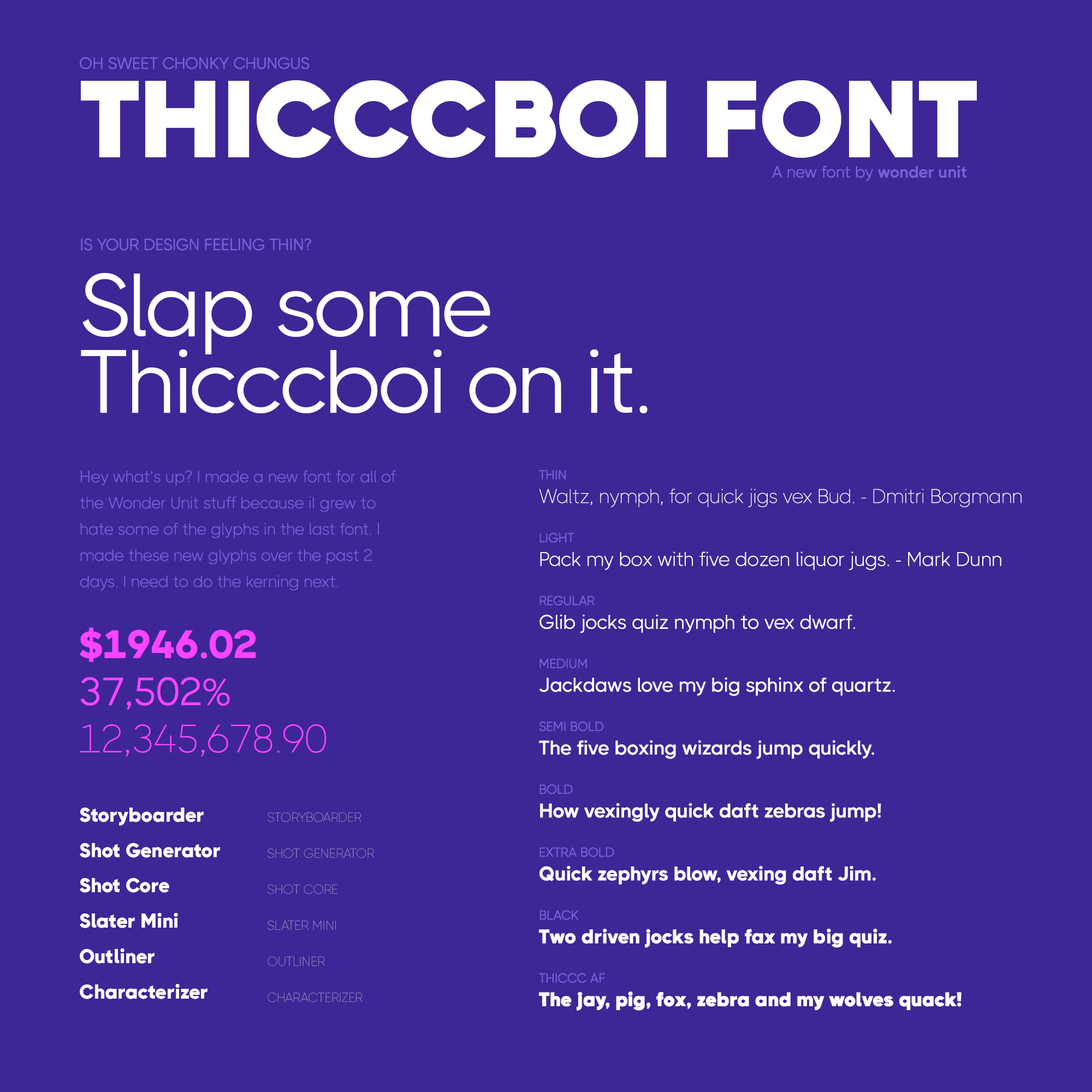
<style>
.page{position:relative;width:1092px;height:1092px;background:#3e2696}
.page>*{position:absolute;margin:0}
.t1{font:16.4px "THICCCBOI-Regular";color:#7b60dc}
.t2{font:109.3px "THICCCBOI-ThicccAF";color:#ffffff}
.t3{font:16.4px "THICCCBOI-Bold";color:#7b60dc}
.t4{font:16.4px "THICCCBOI-Regular";color:#7b60dc;text-transform:uppercase}
.t5{font:89.7px/76.4px "THICCCBOI-Regular";letter-spacing:-0.025em;color:#ffffff}
.t6{font:16.4px/26.2px "THICCCBOI-Light";color:#7b60dc}
.t7{font:19.7px "THICCCBOI-Thin";color:#ffffff}
.t8{font:13.1px "THICCCBOI-Regular";color:#7b60dc}
.t9{font:19.7px "THICCCBOI-Light";color:#ffffff}
.t10{font:19.7px "THICCCBOI-Regular";color:#ffffff}
.t11{font:19.7px "THICCCBOI-Medium";color:#ffffff}
.t12{font:19.7px "THICCCBOI-SemiBold";color:#ffffff}
.t13{font:19.7px "THICCCBOI-Bold";color:#ffffff}
.t14{font:19.7px "THICCCBOI-ExtraBold";color:#ffffff}
.t15{font:19.7px "THICCCBOI-Black";color:#ffffff}
.t16{font:19.7px "THICCCBOI-ThicccAF";color:#ffffff}
.t17{font:39.3px "THICCCBOI-Thin";color:#fd44ff}
.t18{font:39.3px "THICCCBOI-ExtraBold";color:#fd44ff}
.t19{font:39.3px "THICCCBOI-Regular";color:#fd44ff}
.t20{font:19.7px/35.4px "THICCCBOI-Black";color:#ffffff}
.t21{font:13.1px/36px "THICCCBOI-Thin";color:#a59ec9;text-transform:uppercase}
</style>
<div class="page">
<p class="t1" style="left:80px;top:57px;width:230px;height:12px">OH SWEET CHONKY CHUNGUS</p>
<p class="t2" style="left:81px;top:80px;width:896px;height:78px">THICCCBOI FONT</p>
<p class="t1" style="left:772px;top:165px;width:101px;height:16px">A new font by</p>
<p class="t3" style="left:877px;top:165px;width:89px;height:13px">wonder unit</p>
<p class="t4" style="left:81px;top:238px;width:230px;height:13px">Is your design feeling thin?</p>
<p class="t5" style="left:81px;top:273px;width:567px;height:140px">Slap some <br>Thicccboi on it.</p>
<p class="t6" style="left:80px;top:470px;width:316px;height:121px">Hey what’s up? I made a new font for all of the Wonder Unit stuff because iI grew to hate some of the glyphs in the last font. I made these new glyphs over the past 2 days. I need to do the kerning next.</p>
<p class="t7" style="left:539px;top:470px;width:483px;height:541px"><span class="t8">THIN<br></span>Waltz, nymph, for quick jigs vex Bud. - Dmitri Borgmann<br><br><span class="t8">LIGHT<br></span><span class="t9">Pack my box with five dozen liquor jugs. - Mark Dunn<br><br></span><span class="t8">REGULAR<br></span><span class="t10">Glib jocks quiz nymph to vex dwarf.<br><br></span><span class="t8">MEDIUM<br></span><span class="t11">Jackdaws love my big sphinx of quartz.<br><br></span><span class="t8">SEMI BOLD<br></span><span class="t12">The five boxing wizards jump quickly.<br><br></span><span class="t8">BOLD<br></span><span class="t13">How vexingly quick daft zebras jump!<br><br></span><span class="t8">EXTRA BOLD<br></span><span class="t14">Quick zephyrs blow, vexing daft Jim.<br><br></span><span class="t8">BLACK<br></span><span class="t15">Two driven jocks help fax my big quiz.<br><br></span><span class="t8">THICCC AF<br></span><span class="t16">The jay, pig, fox, zebra and my wolves quack!</span></p>
<p class="t17" style="left:80px;top:627px;width:247px;height:130px"><span class="t18">$1946.02<br></span><span class="t19">37,502%<br></span>12,345,678.90</p>
<p class="t20" style="left:80px;top:808px;width:140px;height:191px">Storyboarder<br>Shot Generator<br>Shot Core<br>Slater Mini<br>Outliner<br>Characterizer</p>
<p class="t21" style="left:268px;top:812px;width:107px;height:190px">Storyboarder<br>Shot Generator<br>Shot Core<br>Slater Mini<br>Outliner<br>Characterizer</p>
</div>
